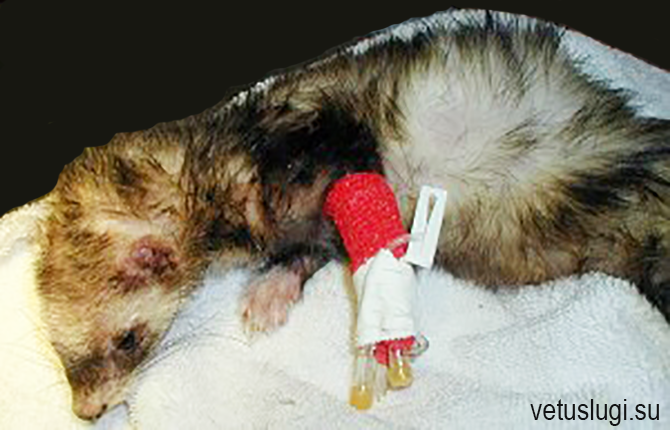
<style>
.page{position:relative;width:670px;height:430px}
.page>*{position:absolute;margin:0}
.t1{font:30px "ArialNarrow";letter-spacing:0.002em;color:#121314}
</style>
<div class="page">
<p class="t1" style="left:530px;top:399px;width:129px;height:27px">vetuslugi.su</p>
</div>
